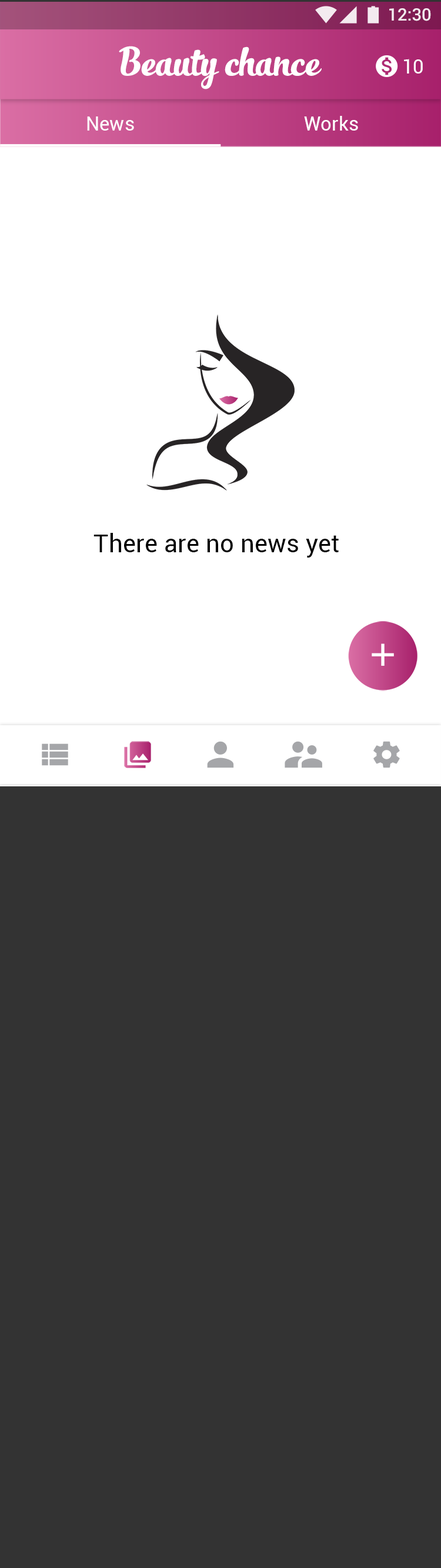
<style>
.page{position:relative;width:441px;height:1568px;background:#333333}
.page>*{position:absolute;margin:0}
.t1{font:17.1px "Roboto-Medium";color:#ffffff}
.t2{font:29.4px "SlimTony-Italic";color:#ffffff}
.t3{font:19.6px "Roboto-Regular";letter-spacing:-0.015em;color:#ffffff}
.t4{font:19.6px "Roboto-Regular";color:#ffffff}
.t5{font:24.5px "Roboto-Regular";letter-spacing:0.01em;color:#000000}
</style>
<div class="page">
<p class="t1" style="left:389px;top:8px;width:42px;height:13px">12:30</p>
<p class="t2" style="left:119px;top:46px;width:203px;height:43px">Beauty chance</p>
<p class="t3" style="left:404px;top:59px;width:19px;height:15px">10</p>
<p class="t4" style="left:87px;top:116px;width:47px;height:15px">News</p>
<p class="t4" style="left:304px;top:116px;width:54px;height:15px">Works</p>
<p class="t5" style="left:94px;top:533px;width:245px;height:25px">There are no news yet</p>
</div>
